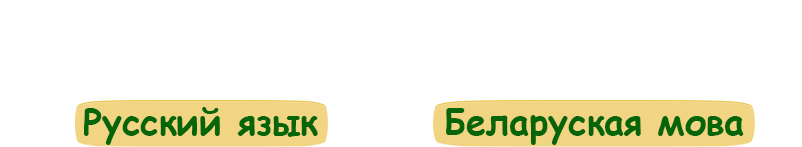
<style>
.page{position:relative;width:802px;height:147px;background:#ffffff}
.page>*{position:absolute;margin:0}
.t1{font:36px "ComicSansMS-Bold";color:#066509}
</style>
<div class="page">
<p class="t1" style="left:84px;top:107px;width:660px;height:38px">Русский язык        Беларуская мова</p>
</div>
